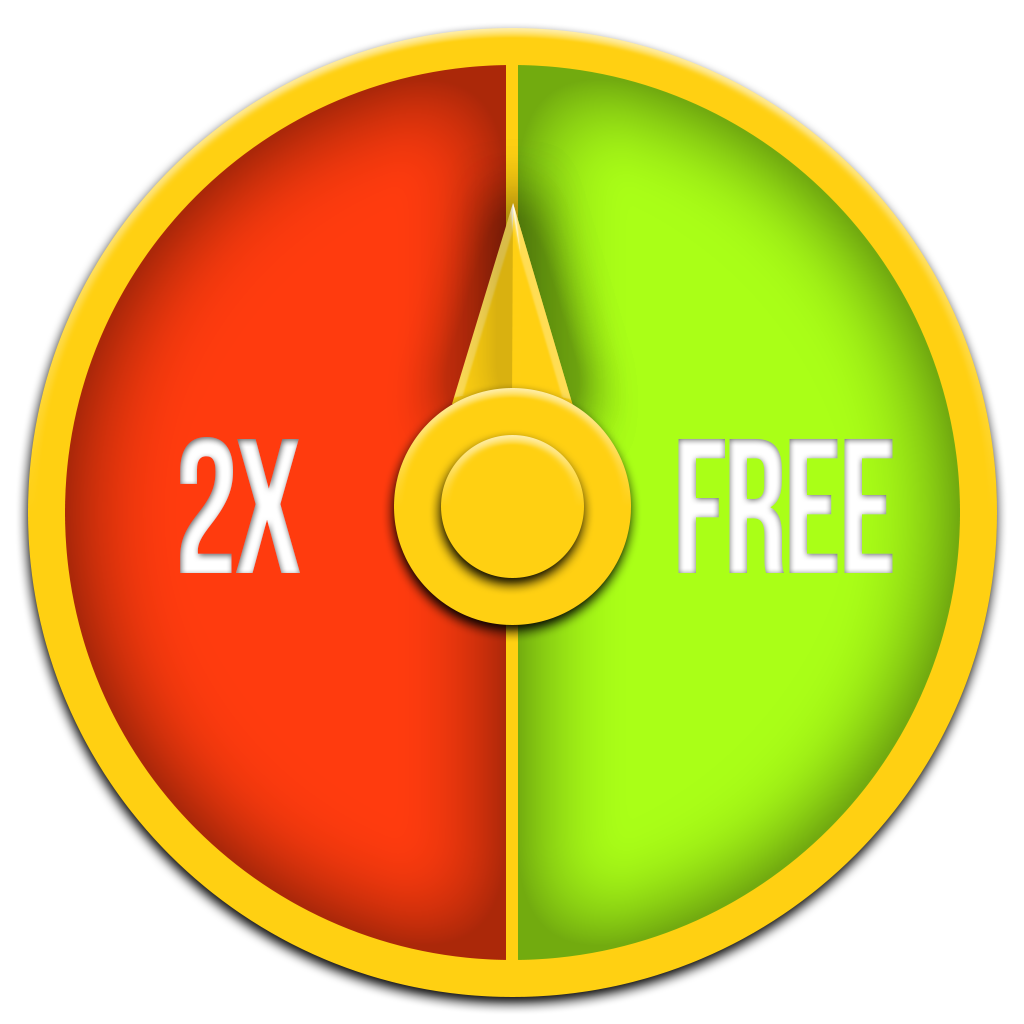
<style>
.page{position:relative;width:1024px;height:1024px;background:#ffffff}
.page>*{position:absolute;margin:0}
.t1{font:192px "BebasNeue";letter-spacing:-0.025em;color:#ffffff;text-transform:uppercase;scale:0.83 1}
</style>
<div class="page">
<p class="t1" style="left:180px;top:436px;width:120px;height:137px">2x</p>
<p class="t1" style="left:678px;top:438px;width:215px;height:135px">free</p>
</div>
